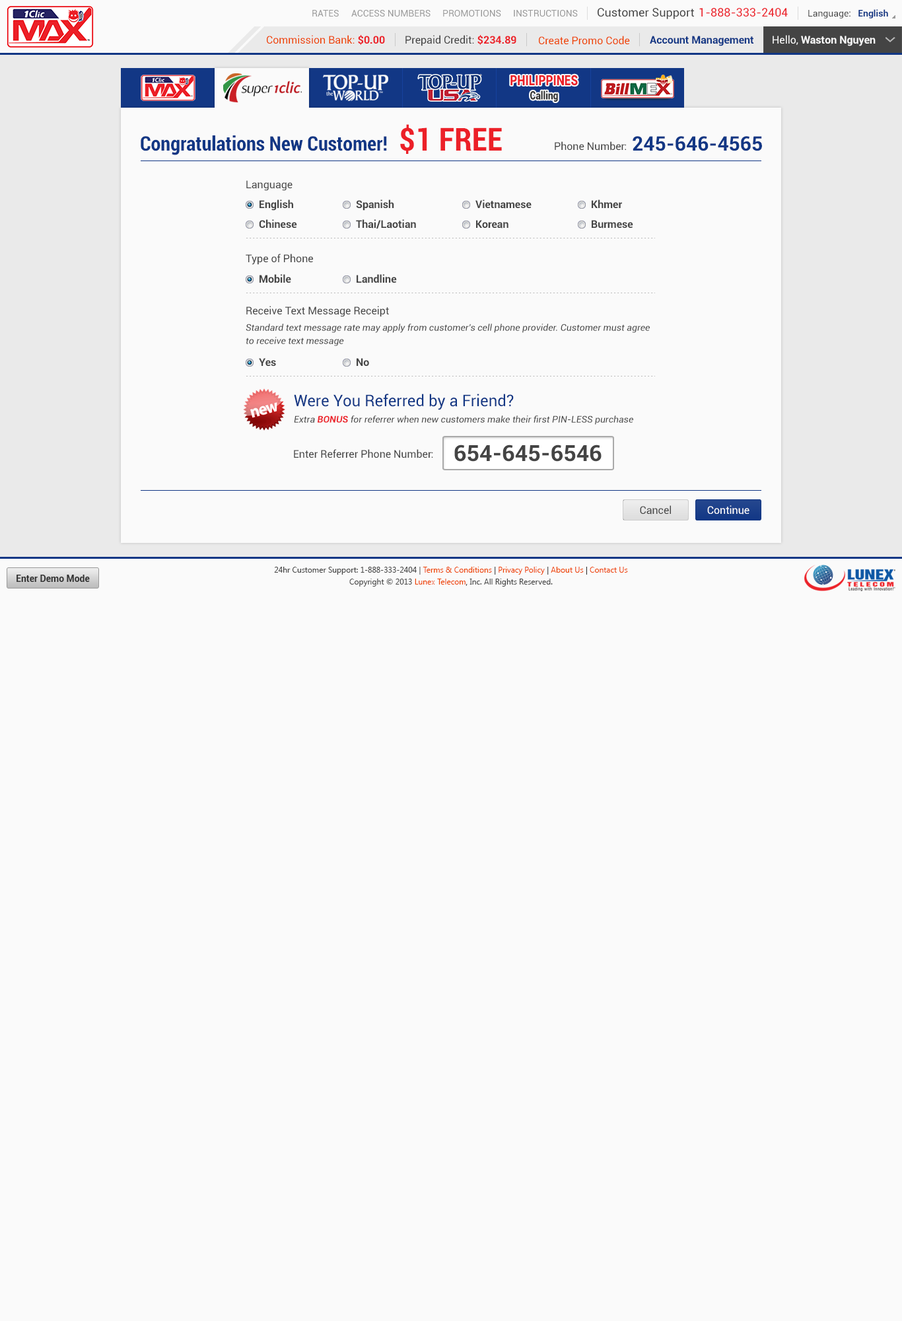
<style>
.page{position:relative;width:902px;height:1321px;background:#fafafa}
.page>*{position:absolute;margin:0}
.t1{font:9.2px "Roboto-Regular";color:#999999}
.t2{font:11.6px "Roboto-Regular";color:#444444}
.t3{font:11.6px "Roboto-Regular";color:#ec2029}
.t4{font:9.2px "Roboto-Regular";color:#444444}
.t5{font:9.2px "Roboto-Bold";color:#123785}
.t6{font:10.6px "Roboto-Regular";color:#ee4400}
.t7{font:10.6px "Roboto-Bold";color:#ec2028}
.t8{font:10.6px "Roboto-Regular";color:#444444}
.t9{font:10.6px "Roboto-Bold";color:#123785}
.t10{font:10.6px "Roboto-Bold";color:#fafafa}
.t11{font:10.6px "Roboto-Regular";color:#fafafa}
.t12{font:14.1px "Roboto-Black";color:#ec2028;scale:0.81 1}
.t13{font:11.3px "Roboto-Black";color:#333333;scale:0.81 1}
.t14{font:31.7px "Roboto-BoldCondensed";color:#ec2028}
.t15{font:19.8px "Roboto-BoldCondensed";color:#123785}
.t16{font:19.8px "Roboto-Bold";color:#123785}
.t17{font:10.6px "Roboto-Bold";color:#444444}
.t18{font:9.2px/13.2px "Roboto-Italic";color:#444444}
.t19{font:15.9px "Roboto-Regular";color:#123785}
.t20{font:9.2px "Roboto-Italic";color:#444444}
.t21{font:9.2px "Roboto-BoldItalic";color:#ec2129}
.t22{font:22.5px "Roboto-Bold";color:#444444}
.t23{font:10.6px "Roboto-Regular";color:#ffffff}
.t24{font:7.9px/11.9px "SegoeUI";color:#444444}
.t25{font:7.9px/11.9px "SegoeUI";color:#ee4400}
.t26{font:7.9px/11.9px "SegoeUI";color:#333333}
.t27{font:9.2px "Roboto-Bold";color:#333333}
</style>
<div class="page">
<p class="t1" style="left:312px;top:10px;width:27px;height:7px">RATES</p>
<p class="t1" style="left:351px;top:10px;width:80px;height:7px">ACCESS NUMBERS</p>
<p class="t1" style="left:443px;top:10px;width:58px;height:7px">PROMOTIONS</p>
<p class="t1" style="left:514px;top:10px;width:64px;height:7px">INSTRUCTIONS</p>
<p class="t2" style="left:598px;top:8px;width:96px;height:11px">Customer Support</p>
<p class="t3" style="left:700px;top:8px;width:88px;height:9px">1-888-333-2404</p>
<p class="t4" style="left:809px;top:9px;width:80px;height:9px">Language:   <span class="t5">English</span></p>
<p class="t6" style="left:267px;top:35px;width:118px;height:10px">Commission Bank: <span class="t7">$0.00</span></p>
<p class="t8" style="left:406px;top:35px;width:111px;height:11px">Prepaid Credit: <span class="t7">$234.89</span></p>
<p class="t6" style="left:539px;top:36px;width:91px;height:9px">Create Promo Code</p>
<p class="t9" style="left:650px;top:36px;width:104px;height:10px">Account Management</p>
<p class="t10" style="left:773px;top:35px;width:103px;height:11px"><span class="t11">Hello, </span>Waston Nguyen</p>
<p class="t12" style="left:511px;top:75px;width:67px;height:11px">PHILIPPINES</p>
<p class="t13" style="left:531px;top:91px;width:27px;height:11px">Calling</p>
<p class="t14" style="left:400px;top:124px;width:102px;height:30px">$1 FREE</p>
<p class="t15" style="left:141px;top:135px;width:246px;height:20px">Congratulations New Customer!</p>
<p class="t16" style="left:633px;top:136px;width:129px;height:15px">245-646-4565</p>
<p class="t8" style="left:555px;top:141px;width:71px;height:10px">Phone Number:</p>
<p class="t8" style="left:246px;top:180px;width:47px;height:11px">Language</p>
<p class="t17" style="left:260px;top:200px;width:33px;height:11px">English</p>
<p class="t17" style="left:356px;top:200px;width:38px;height:11px">Spanish</p>
<p class="t17" style="left:476px;top:200px;width:56px;height:9px">Vietnamese</p>
<p class="t17" style="left:592px;top:200px;width:30px;height:8px">Khmer</p>
<p class="t17" style="left:259px;top:219px;width:38px;height:9px">Chinese</p>
<p class="t17" style="left:356px;top:219px;width:60px;height:10px">Thai/Laotian</p>
<p class="t17" style="left:476px;top:220px;width:33px;height:9px">Korean</p>
<p class="t17" style="left:592px;top:220px;width:42px;height:9px">Burmese</p>
<p class="t8" style="left:246px;top:254px;width:67px;height:11px">Type of Phone</p>
<p class="t17" style="left:260px;top:274px;width:31px;height:9px">Mobile</p>
<p class="t17" style="left:357px;top:274px;width:40px;height:9px">Landline</p>
<p class="t8" style="left:246px;top:306px;width:143px;height:11px">Receive Text Message Receipt</p>
<p class="t18" style="left:246px;top:324px;width:404px;height:22px">Standard text message rate may apply from customer's cell phone provider. Customer must agree to receive text message</p>
<p class="t17" style="left:259px;top:358px;width:17px;height:8px">Yes</p>
<p class="t17" style="left:357px;top:358px;width:12px;height:8px">No</p>
<p class="t19" style="left:294px;top:394px;width:220px;height:16px">Were You Referred by a Friend?</p>
<p class="t20" style="left:294px;top:416px;width:340px;height:9px">Extra <span class="t21">BONUS</span> for referrer when new customers make their first PIN-LESS purchase</p>
<p class="t8" style="left:294px;top:449px;width:139px;height:9px">Enter Referrer Phone Number:</p>
<p class="t22" style="left:455px;top:445px;width:147px;height:17px">654-645-6546</p>
<p class="t8" style="left:640px;top:505px;width:31px;height:10px">Cancel</p>
<p class="t23" style="left:708px;top:505px;width:42px;height:10px">Continue</p>
<p class="t24" style="left:274px;top:567px;width:354px;height:20px;text-align:center">24hr Customer Support: 1-888-333-2404 | <span class="t25">Terms &amp; Conditions</span><span class="t26"> | </span><span class="t25">Privacy Policy</span><span class="t26"> | </span><span class="t25">About Us</span><span class="t26"> | </span><span class="t25">Contact Us<br></span>Copyright © 2013 <span class="t25">Lunex Telecom</span><span class="t26">,</span> Inc. All Rights Reserved.</p>
<p class="t27" style="left:17px;top:575px;width:73px;height:7px">Enter Demo Mode</p>
</div>
